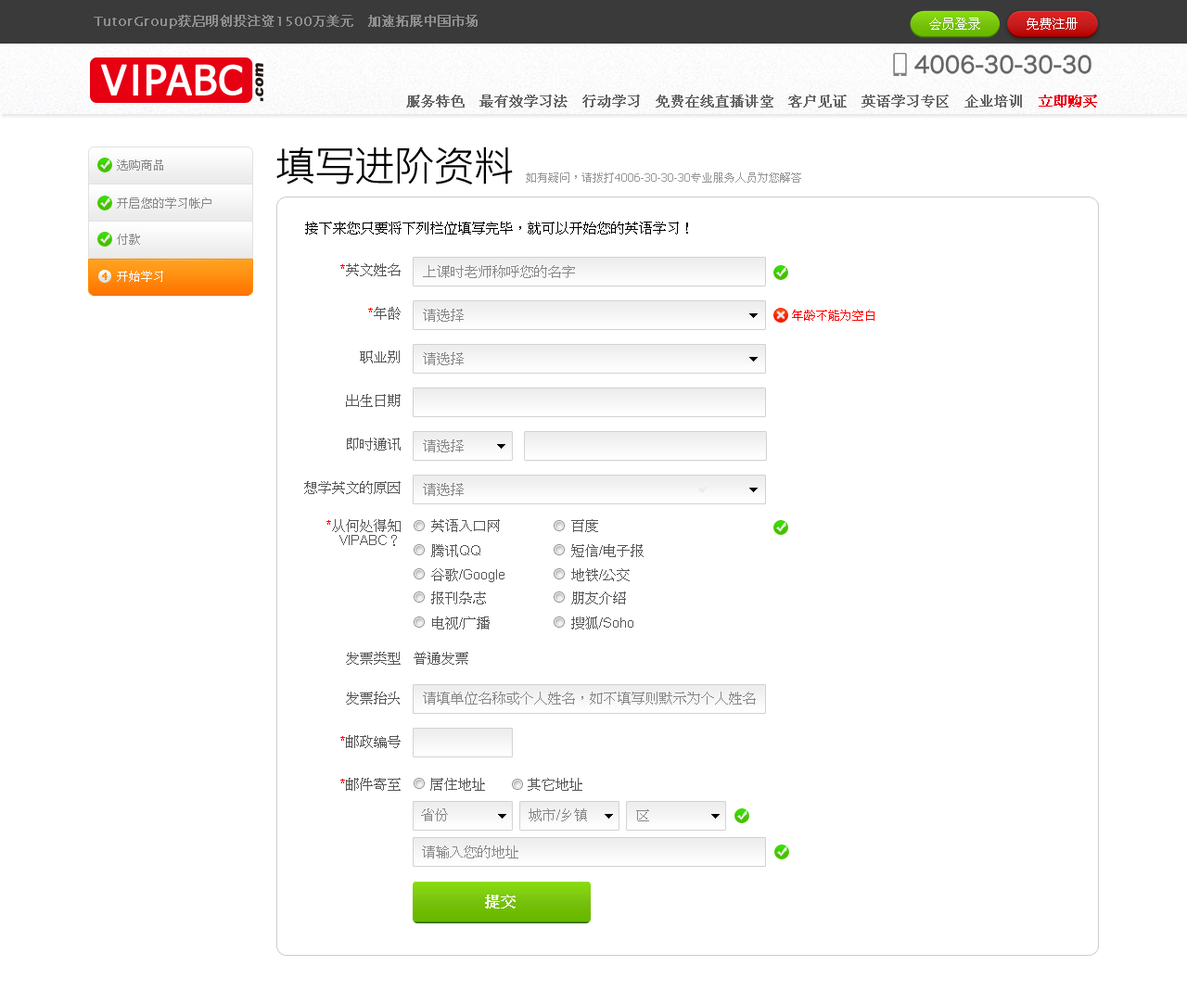
<style>
.page{position:relative;width:1187px;height:1004px;background:#ffffff}
.page>*{position:absolute;margin:0}
.t1{font:41.7px "MicrosoftJhengHeiRegular";letter-spacing:-0.05em;color:#000000}
.t2{font:12.1px "PMingLiU";color:#888888}
.t3{font:11.1px "Tahoma";color:#999999}
.t4{font:11.1px "PMingLiU";color:#999999}
.t5{font:13.9px "PMingLiU";color:#000000}
.t6{font:13.9px/14.6px "PMingLiU";color:#555555}
.t7{font:13.9px/14.8px "ArialMT";color:#ff0000}
.t8{font:13.9px/14.8px "PMingLiU";color:#555555}
.t9{font:13.9px/14.6px "ArialMT";color:#ff0000}
.t10{font:13.9px/14.8px "ArialMT";color:#555555}
.t11{font:13.9px/43.6px "PMingLiU";color:#888888}
.t12{font:10.2px "Tahoma";color:#ff9000;font-weight:bold}
.t13{font:12.1px "PMingLiU";color:#ffffff}
.t14{font:12.1px "PMingLiU";color:#ff0000}
.t15{font:13.9px/24.1px "PMingLiU";color:#555555}
.t16{font:13.9px/24.1px "ArialMT";color:#555555}
.t17{font:13.9px "PMingLiU";color:#555555}
.t18{font:13.9px "PMingLiU";color:#888888}
.t19{font:14.8px "PMingLiU";color:#ffffff;font-weight:bold}
</style>
<div class="page">
<p class="t1" style="left:276px;top:147px;width:237px;height:38px">填写进阶资料</p>
<p class="t2" style="left:117px;top:160px;width:46px;height:11px">选购商品</p>
<p class="t3" style="left:526px;top:173px;width:275px;height:10px"><span class="t4">如有疑问，请拨打</span>4006-30-30-30<span class="t4">专业服务人员为您解答</span></p>
<p class="t2" style="left:117px;top:198px;width:94px;height:11px">开启您的学习帐户</p>
<p class="t5" style="left:305px;top:222px;width:383px;height:13px">接下来您只要将下列栏位填写完毕，就可以开始您的英语学习！</p>
<p class="t2" style="left:117px;top:234px;width:23px;height:11px">付款</p>
<p class="t6" style="left:304px;top:263px;width:97px;height:528px;text-align:right"><span class="t7">*</span><span class="t8">英文</span>姓名<br><br><br><span class="t9">*</span>年龄<br><br><br>职业别<br><br><br>出生日期<br><br><br>即时通讯<br><br><br>想学英文的原因<br><br><span class="t7">*</span><span class="t8">从何处得知</span><span class="t10"><br>VIPABC</span><span class="t8">？<br><br><br><br><br><br><br><br>发票类型<br><br><br>发票抬头<br><br><br></span><span class="t7">*</span><span class="t8">邮政编号<br><br><br></span><span class="t7">*</span><span class="t8">邮件寄至</span></p>
<p class="t11" style="left:423px;top:265px;width:152px;height:231px">上课时老师称呼您的名字<br>请选择<br>请选择<br><br>请选择<br>请选择</p>
<p class="t12" style="left:102px;top:273px;width:6px;height:7px">4</p>
<p class="t13" style="left:117px;top:271px;width:46px;height:11px">开始学习</p>
<p class="t14" style="left:792px;top:310px;width:83px;height:11px">年龄不能为空白</p>
<p class="t15" style="left:431px;top:519px;width:74px;height:111px">英语入口网<br>腾讯<span class="t16">QQ<br></span>谷歌<span class="t16">/Google<br></span>报刊杂志<br>电视<span class="t16">/</span>广播</p>
<p class="t15" style="left:571px;top:519px;width:73px;height:111px">百度<br>短信<span class="t16">/</span>电子报<br>地铁<span class="t16">/</span>公交<br>朋友介绍<br>搜狐<span class="t16">/Soho</span></p>
<p class="t17" style="left:414px;top:652px;width:54px;height:13px">普通发票</p>
<p class="t18" style="left:423px;top:692px;width:333px;height:13px">请填单位名称或个人姓名，如不填写则默示为个人姓名</p>
<p class="t17" style="left:430px;top:778px;width:152px;height:13px">居住地址　　　其它地址</p>
<p class="t18" style="left:421px;top:809px;width:27px;height:13px">省份</p>
<p class="t18" style="left:529px;top:809px;width:58px;height:13px">城市/乡镇</p>
<p class="t18" style="left:636px;top:810px;width:13px;height:12px">区</p>
<p class="t18" style="left:422px;top:846px;width:96px;height:13px">请输入您的地址</p>
<p class="t19" style="left:485px;top:895px;width:31px;height:14px">提交</p>
</div>
